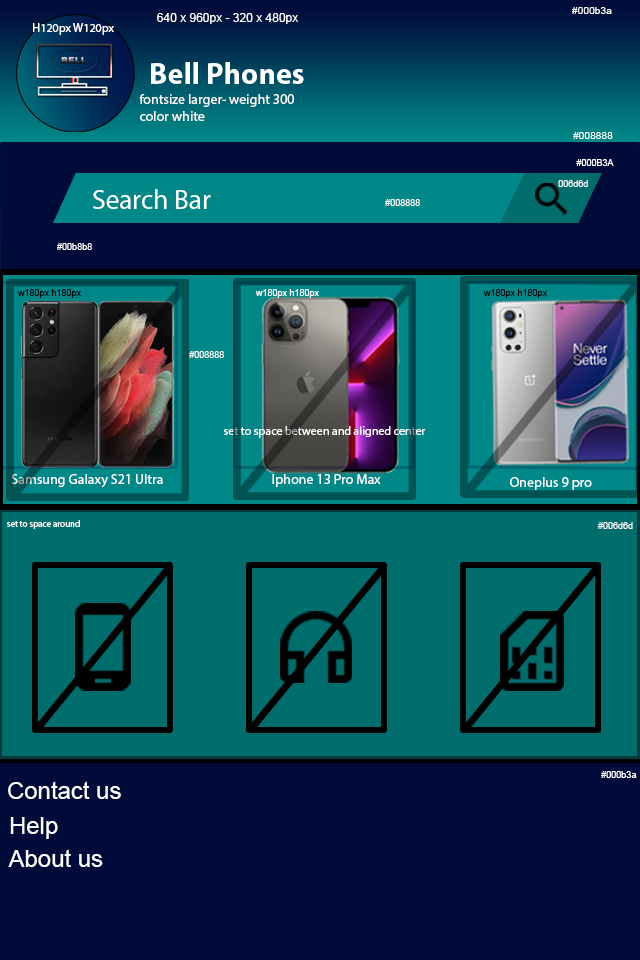
<style>
.page{position:relative;width:640px;height:960px;background:#000b3a}
.page>*{position:absolute;margin:0}
.t1{font:12px "ArialMT";color:#ffffff}
.t2{font:10.2px "ArialMT";color:#ffffff}
.t3{font:12px "MyriadPro-Regular";color:#ffffff}
.t4{font:30px "MyriadPro-Bold";color:#ffffff}
.t5{font:14px "MyriadPro-Regular";color:#ffffff}
.t6{font:9px "ArialMT";color:#ffffff}
.t7{font:27.3px "MyriadPro-Regular";color:#ffffff}
.t8{font:9px "ArialMT";color:#000000}
.t9{font:9px "MyriadPro-Regular";color:#ffffff}
.t10{font:23.9px "ArialMT";color:#ffffff}
</style>
<div class="page">
<p class="t1" style="left:157px;top:13px;width:141px;height:11px">640 x 960px - 320 x 480px</p>
<p class="t2" style="left:572px;top:7px;width:40px;height:7px">#000b3a</p>
<p class="t3" style="left:33px;top:23px;width:81px;height:12px">H120px W120px</p>
<p class="t4" style="left:151px;top:62px;width:153px;height:22px">Bell Phones</p>
<p class="t5" style="left:139px;top:94px;width:155px;height:27px">fontsize larger- weight 300<br>color white</p>
<p class="t2" style="left:573px;top:132px;width:40px;height:7px">#008888</p>
<p class="t6" style="left:576px;top:159px;width:38px;height:7px">#000B3A</p>
<p class="t6" style="left:558px;top:180px;width:30px;height:7px">006d6d</p>
<p class="t7" style="left:93px;top:189px;width:118px;height:20px">Search Bar</p>
<p class="t6" style="left:385px;top:199px;width:35px;height:7px">#008888</p>
<p class="t6" style="left:57px;top:243px;width:35px;height:7px">#00b8b8</p>
<p class="t8" style="left:18px;top:289px;width:63px;height:9px">w180px h180px</p>
<p class="t6" style="left:256px;top:289px;width:63px;height:9px">w180px h180px</p>
<p class="t8" style="left:484px;top:289px;width:63px;height:9px">w180px h180px</p>
<p class="t6" style="left:189px;top:351px;width:35px;height:7px">#008888</p>
<p class="t3" style="left:223px;top:426px;width:203px;height:12px">set to space between and aligned center</p>
<p class="t5" style="left:11px;top:474px;width:152px;height:14px">Samsung Galaxy S21 Ultra</p>
<p class="t5" style="left:272px;top:474px;width:109px;height:13px">Iphone 13 Pro Max</p>
<p class="t5" style="left:510px;top:477px;width:82px;height:13px">Oneplus 9 pro</p>
<p class="t9" style="left:7px;top:520px;width:73px;height:9px">set to space around</p>
<p class="t6" style="left:597px;top:522px;width:36px;height:7px">#006d6d</p>
<p class="t6" style="left:601px;top:771px;width:36px;height:7px">#000b3a</p>
<p class="t10" style="left:8px;top:781px;width:113px;height:18px">Contact us</p>
<p class="t10" style="left:10px;top:817px;width:48px;height:22px">Help</p>
<p class="t10" style="left:8px;top:849px;width:95px;height:18px">About us</p>
</div>
